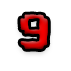
<style>
.page{position:relative;width:71px;height:71px;background:#ffffff}
.page>*{position:absolute;margin:0}
.t1{font:55px "Tipi-Organic"}
</style>
<div class="page">
<p class="t1" style="left:20px;top:14px;width:28px;height:35px">9</p>
</div>
